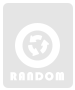
<style>
.page{position:relative;width:75px;height:90px;background:#e5e5e5}
.page>*{position:absolute;margin:0}
.t1{font:12px "Bauhaus93";letter-spacing:0.1em;color:#ffffff}
</style>
<div class="page">
<p class="t1" style="left:10px;top:72px;width:54px;height:9px">RANDOM</p>
</div>
